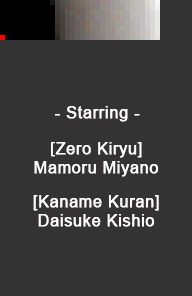
<style>
.page{position:relative;width:192px;height:296px;background:#333333}
.page>*{position:absolute;margin:0}
.t1{font:16px "ArialMT";letter-spacing:0.025em;color:#ffffff;font-weight:bold}
.t2{font:16px/18.7px "ArialMT";letter-spacing:0.025em;color:#ffffff;font-weight:bold}
.t3{font:16px/18.7px "KozGoPr6N-Regular";letter-spacing:0.025em;color:#ffffff;font-weight:bold}
</style>
<div class="page">
<p class="t1" style="left:54px;top:106px;width:86px;height:16px">- Starring -</p>
<p class="t2" style="left:33px;top:141px;width:126px;height:86px;text-align:center"><span class="t3">[</span>Zero Kiryu]<br>Mamoru Miyano<br> <br>[Kaname Kuran]<br>Daisuke Kishio</p>
</div>
